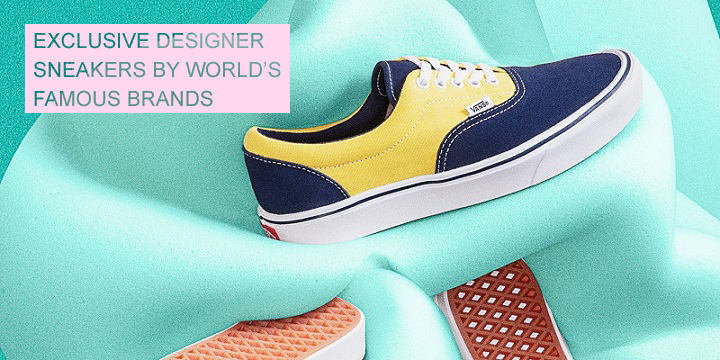
<style>
.page{position:relative;width:720px;height:360px}
.page>*{position:absolute;margin:0}
.t1{font:20.8px/29.2px "ArialMT"}
</style>
<div class="page">
<p class="t1" style="left:34px;top:32px;width:247px;height:75px">EXCLUSIVE DESIGNER <br>SNEAKERS BY WORLD’S <br>FAMOUS BRANDS</p>
</div>
